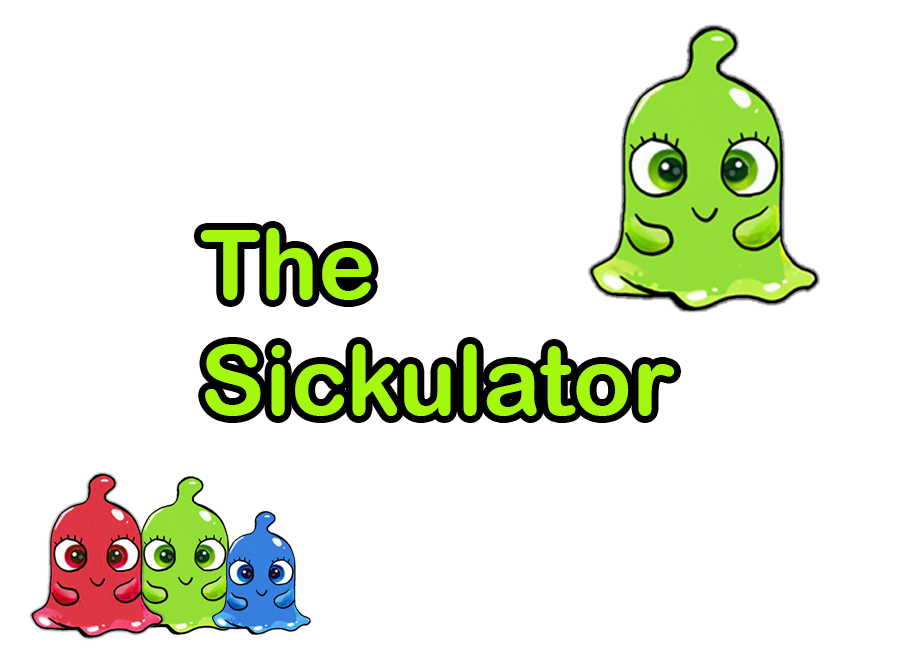
<style>
.page{position:relative;width:900px;height:650px;background:#ffffff}
.page>*{position:absolute;margin:0}
.t1{font:97px "ArialRoundedMTBold";color:#a4f80e}
</style>
<div class="page">
<p class="t1" style="left:200px;top:228px;width:475px;height:188px">The <br>Sickulator</p>
</div>
